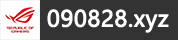
<style>
.page{position:relative;width:178px;height:40px;background:#333333}
.page>*{position:absolute;margin:0}
.t1{font:22px "MicrosoftYaHei";color:#ffffff;font-weight:bold}
</style>
<div class="page">
<p class="t1" style="left:47px;top:9px;width:122px;height:24px">090828.xyz</p>
</div>
